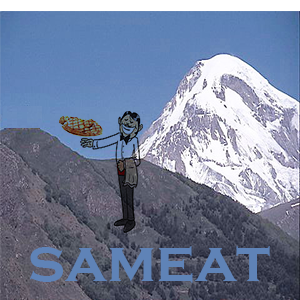
<style>
.page{position:relative;width:300px;height:300px}
.page>*{position:absolute;margin:0}
.t1{font:60px "CopperplateGothic-Bold";color:#5f83b7}
</style>
<div class="page">
<p class="t1" style="left:30px;top:246px;width:240px;height:37px">sameat</p>
</div>
